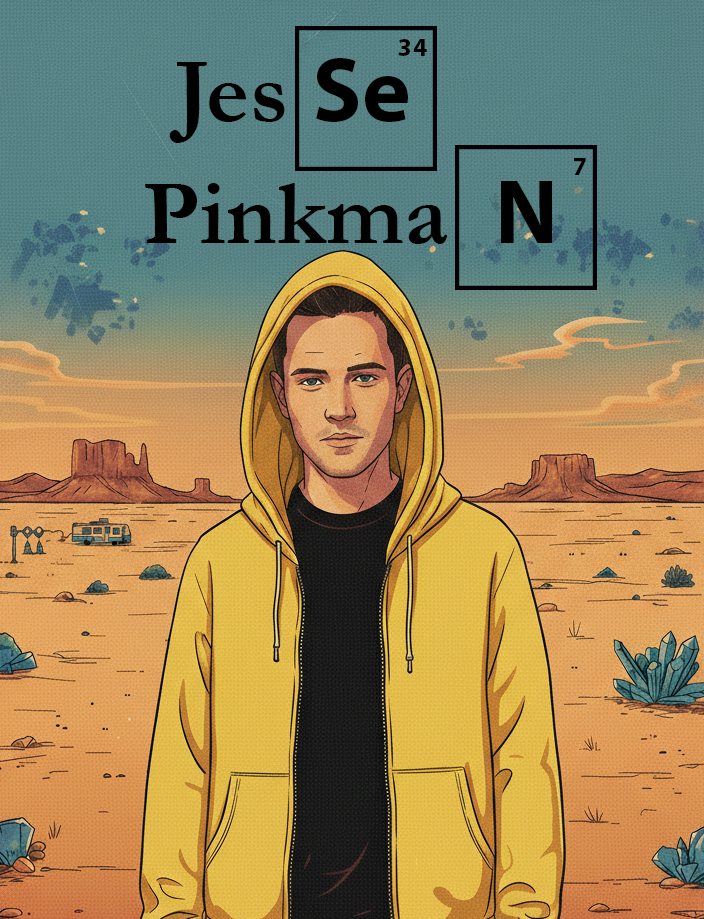
<style>
.page{position:relative;width:704px;height:919px}
.page>*{position:absolute;margin:0}
.t1{font:25.7px "MyriadPro-Bold";letter-spacing:0.05em;color:#000000}
.t2{font:91.8px "Garamond-Bold";letter-spacing:0.005em;color:#000000}
.t3{font:91.8px "MyriadPro-Bold";letter-spacing:0.005em;color:#000000}
</style>
<div class="page">
<p class="t1" style="left:398px;top:39px;width:29px;height:17px">34</p>
<p class="t2" style="left:169px;top:58px;width:239px;height:85px">Jes <span class="t3">Se</span></p>
<p class="t1" style="left:574px;top:158px;width:12px;height:17px">7</p>
<p class="t2" style="left:145px;top:181px;width:407px;height:63px">Pinkma  <span class="t3">N</span></p>
</div>
